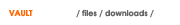
<style>
.page{position:relative;width:180px;height:25px;background:#ffffff}
.page>*{position:absolute;margin:0}
.t1{font:8px "Atlanta-Demi";color:#ff6600}
.t2{font:8px "Atlanta-Demi";color:#666666}
</style>
<div class="page">
<p class="t1" style="left:9px;top:10px;width:24px;height:7px">VAULT</p>
<p class="t2" style="left:76px;top:9px;width:78px;height:9px"><span class="t1"> </span>/ files / downloads /</p>
</div>
